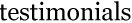
<style>
.page{position:relative;width:132px;height:23px;background:#ffffff}
.page>*{position:absolute;margin:0}
.t1{font:25.1px "Georgia";color:#000000}
</style>
<div class="page">
<p class="t1" style="left:0px;top:1px;width:131px;height:20px">testimonials</p>
</div>
